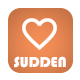
<style>
.page{position:relative;width:80px;height:80px;background:#ffffff}
.page>*{position:absolute;margin:0}
.t1{font:15px "Bauhaus93";color:#ffffff}
</style>
<div class="page">
<p class="t1" style="left:14px;top:56px;width:52px;height:12px">SUDDEN</p>
</div>
